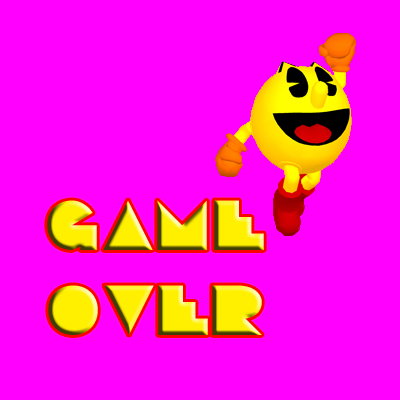
<style>
.page{position:relative;width:400px;height:400px;background:#ff00ff}
.page>*{position:absolute;margin:0}
.t1{font:70.6px "PacmaniaNormal";letter-spacing:-0.005em}
</style>
<div class="page">
<p class="t1" style="left:47px;top:200px;width:217px;height:135px;text-align:center">GAME<br>OVER</p>
</div>
